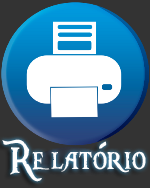
<style>
.page{position:relative;width:150px;height:188px;background:#333333}
.page>*{position:absolute;margin:0}
.t1{font:49.1px "SugoiGame";letter-spacing:0.01em;color:#fefefe;scale:0.78 1}
</style>
<div class="page">
<p class="t1" style="left:2px;top:139px;width:144px;height:43px">Relatório</p>
</div>
